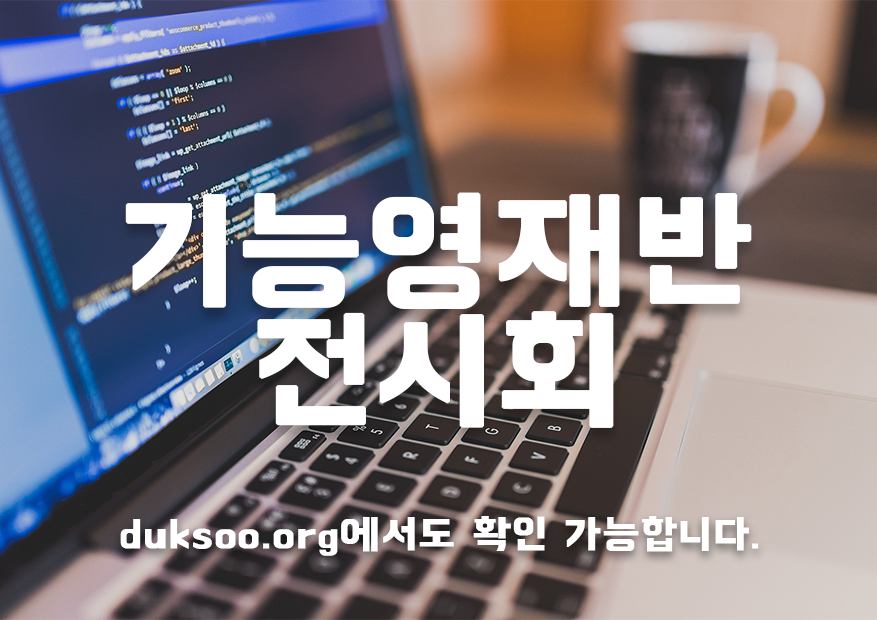
<style>
.page{position:relative;width:877px;height:620px}
.page>*{position:absolute;margin:0}
.t1{font:132px/120px "BMHANNA11yrsold";letter-spacing:0.01em;color:#ffffff;font-weight:bold;scale:1.09 1}
.t2{font:39.6px "BMHANNA11yrsold";letter-spacing:0.01em;color:#ffffff;font-weight:bold;scale:1.09 1}
</style>
<div class="page">
<p class="t1" style="left:125px;top:192px;width:627px;height:236px;text-align:center">기능영재반<br>전시회</p>
<p class="t2" style="left:120px;top:516px;width:639px;height:40px">duksoo.org에서도 확인 가능합니다.</p>
</div>
